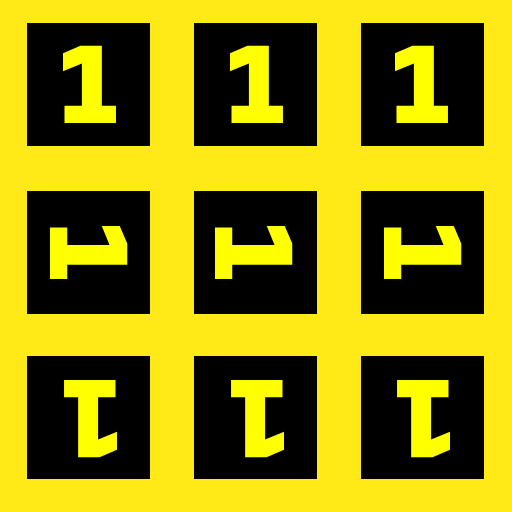
<style>
.page{position:relative;width:512px;height:512px;background:#ffea17}
.page>*{position:absolute;margin:0}
.t1{font:150px "Share-BoldOSF";color:#ffff00}
</style>
<div class="page">
<p class="t1" style="left:63px;top:45px;width:53px;height:78px">1</p>
<p class="t1" style="left:230px;top:45px;width:53px;height:78px">1</p>
<p class="t1" style="left:395px;top:45px;width:53px;height:78px">1</p>
<p class="t1" style="left:50px;top:226px;width:78px;height:53px;rotate:90deg">1</p>
<p class="t1" style="left:215px;top:226px;width:78px;height:53px;rotate:90deg">1</p>
<p class="t1" style="left:384px;top:226px;width:78px;height:53px;rotate:90deg">1</p>
<p class="t1" style="left:64px;top:379px;width:54px;height:79px;rotate:-180deg">1</p>
<p class="t1" style="left:231px;top:379px;width:54px;height:79px;rotate:-180deg">1</p>
<p class="t1" style="left:397px;top:379px;width:54px;height:79px;rotate:-180deg">1</p>
</div>
